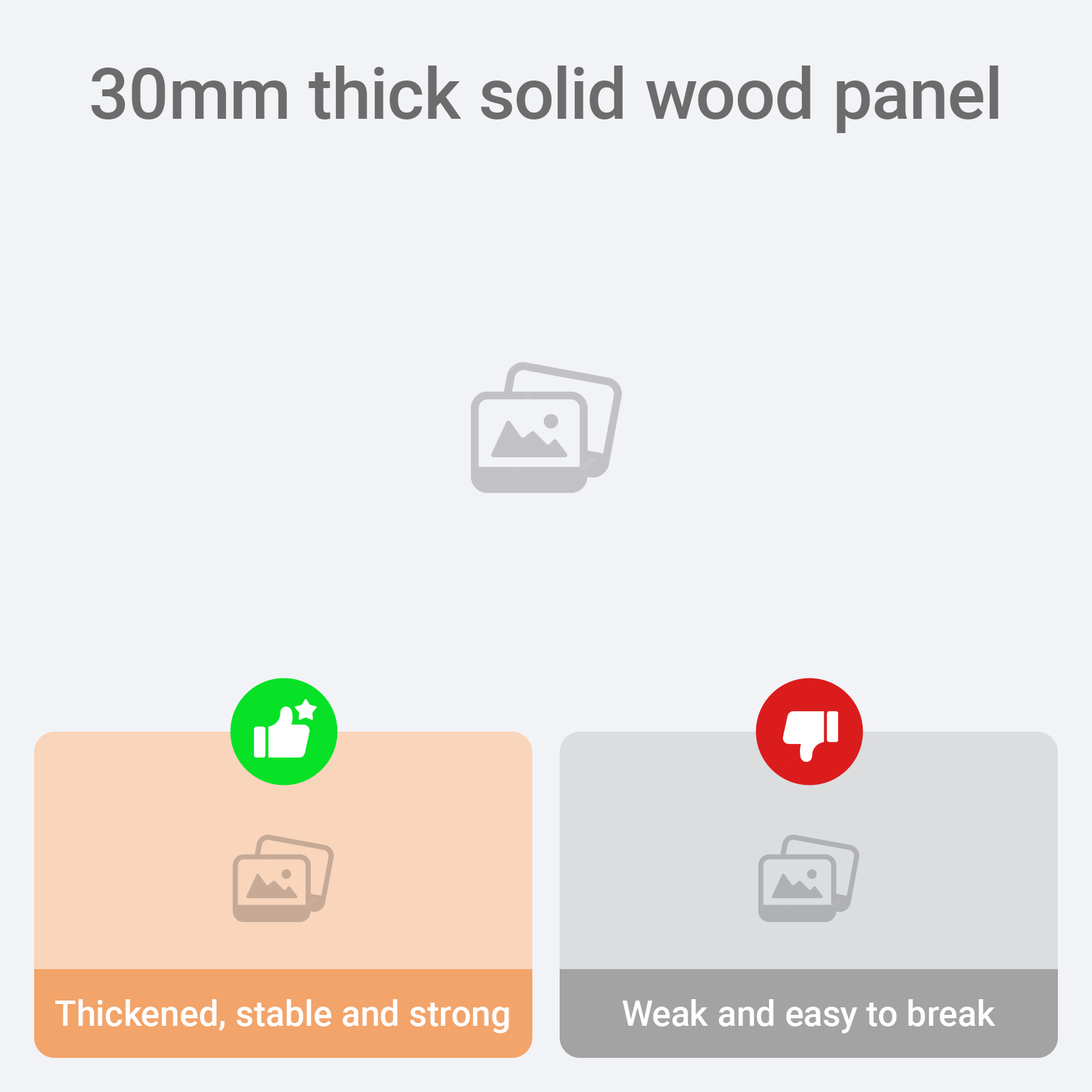
<style>
.page{position:relative;width:1092px;height:1092px;background:#f2f3f6}
.page>*{position:absolute;margin:0}
.t1{font:71px "Roboto-Medium";color:#6c6c6c}
.t2{font:35.5px "Roboto-Medium";color:#fffeff}
</style>
<div class="page">
<p class="t1" style="left:91px;top:66px;width:907px;height:67px">30mm thick solid wood panel</p>
<p class="t2" style="left:55px;top:999px;width:454px;height:34px">Thickened, stable and strong</p>
<p class="t2" style="left:622px;top:999px;width:374px;height:34px">Weak and easy to break</p>
</div>
